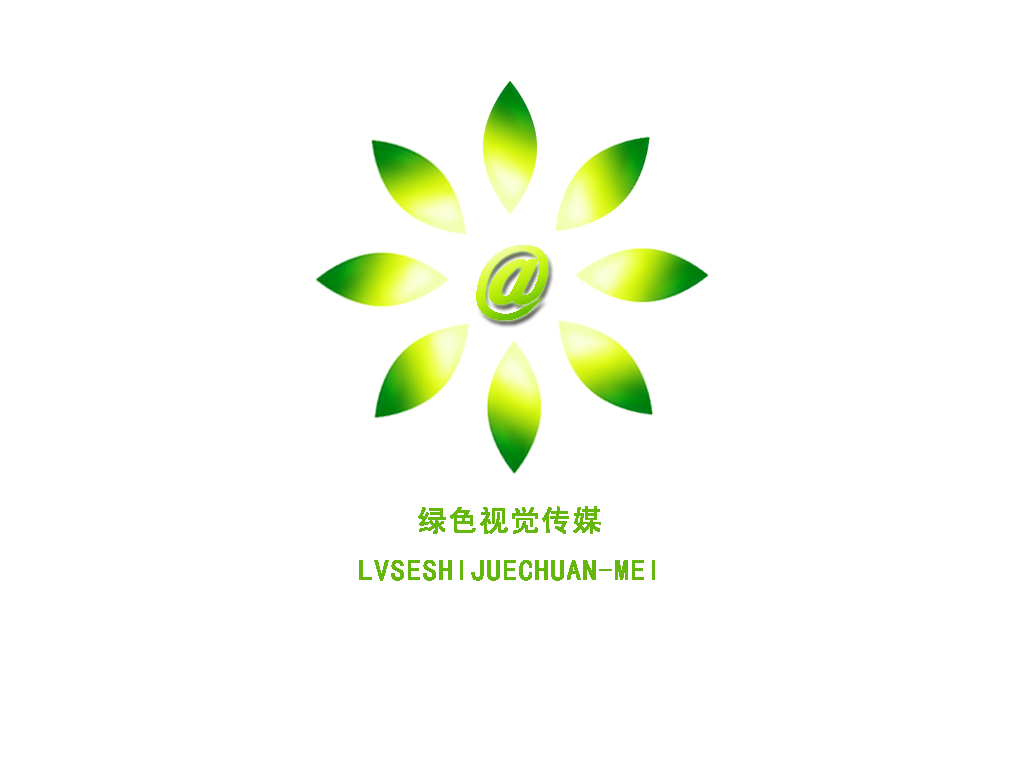
<style>
.page{position:relative;width:1024px;height:768px;background:#ffffff}
.page>*{position:absolute;margin:0}
.t1{font:29.2px/50px "SimHei";color:#66b70d;font-weight:bold}
</style>
<div class="page">
<p class="t1" style="left:359px;top:506px;width:296px;height:75px;text-align:center">绿色视觉传媒<br>LVSESHIJUECHUAN-MEI</p>
</div>
